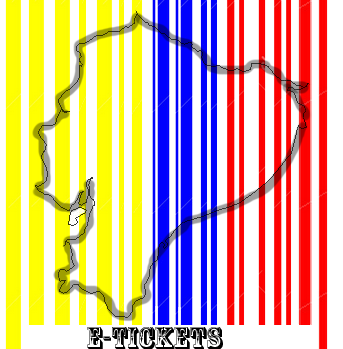
<style>
.page{position:relative;width:343px;height:349px;background:#ffffff}
.page>*{position:absolute;margin:0}
.t1{font:30px "RosewoodStd-Regular";color:#000000}
</style>
<div class="page">
<p class="t1" style="left:87px;top:327px;width:136px;height:23px">e-tickets</p>
</div>
